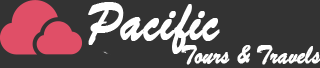
<style>
.page{position:relative;width:320px;height:68px;background:#333333}
.page>*{position:absolute;margin:0}
.t1{font:59.4px "BrushScriptMT";color:#ffffff;font-weight:bold;scale:0.89 1}
.t2{font:27.8px "BrushScriptMT";color:#ffffff;font-weight:bold;scale:0.89 1}
</style>
<div class="page">
<p class="t1" style="left:88px;top:2px;width:132px;height:52px">Pacific</p>
<p class="t2" style="left:181px;top:45px;width:140px;height:20px">Tours &amp; Travels</p>
</div>
